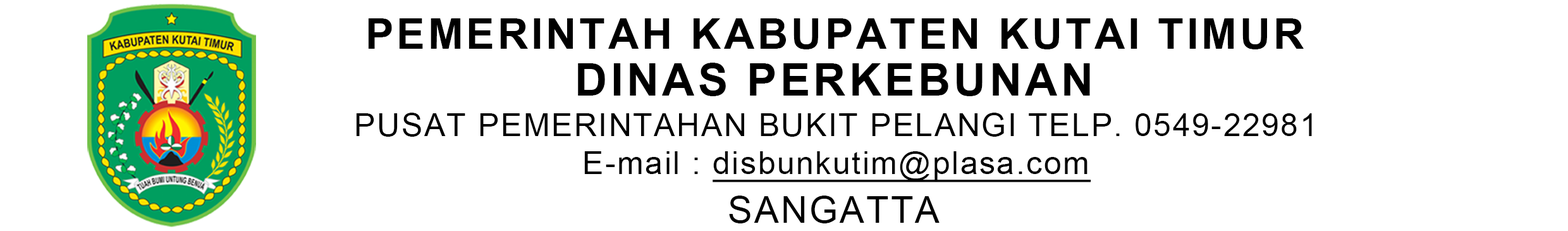
<style>
.page{position:relative;width:1568px;height:231px;background:#ffffff}
.page>*{position:absolute;margin:0}
.t1{font:42.2px "Arial-BoldMT";letter-spacing:0.075em;color:#000000;text-transform:uppercase}
.t2{font:44.8px "Arial-BoldMT";letter-spacing:0.075em;color:#000000;text-transform:uppercase}
.t3{font:31.6px "ArialMT";letter-spacing:0.05em;color:#000000;text-transform:uppercase}
.t4{font:31.6px "ArialMT";letter-spacing:0.05em;color:#000000}
.t5{font:31.6px "ArialMT";letter-spacing:0.05em;color:#000000;text-decoration:underline}
.t6{font:36.9px "ArialMT";letter-spacing:0.05em;color:#000000;text-transform:uppercase}
</style>
<div class="page">
<p class="t1" style="left:368px;top:18px;width:936px;height:31px">PEMERINTAH KABUPATEN KUTAI TIMUR</p>
<p class="t2" style="left:578px;top:63px;width:512px;height:33px">DINAS PERKEBUNAN</p>
<p class="t3" style="left:356px;top:113px;width:956px;height:69px;text-align:center">PUSAT PEMERINTAHAN BUKIT PELANGI TELP. 0549-22981<br>E-<span class="t4">mail </span>: <span class="t5">disbunkutim@plasa.com</span></p>
<p class="t6" style="left:729px;top:195px;width:211px;height:28px">SANGATTA</p>
</div>
